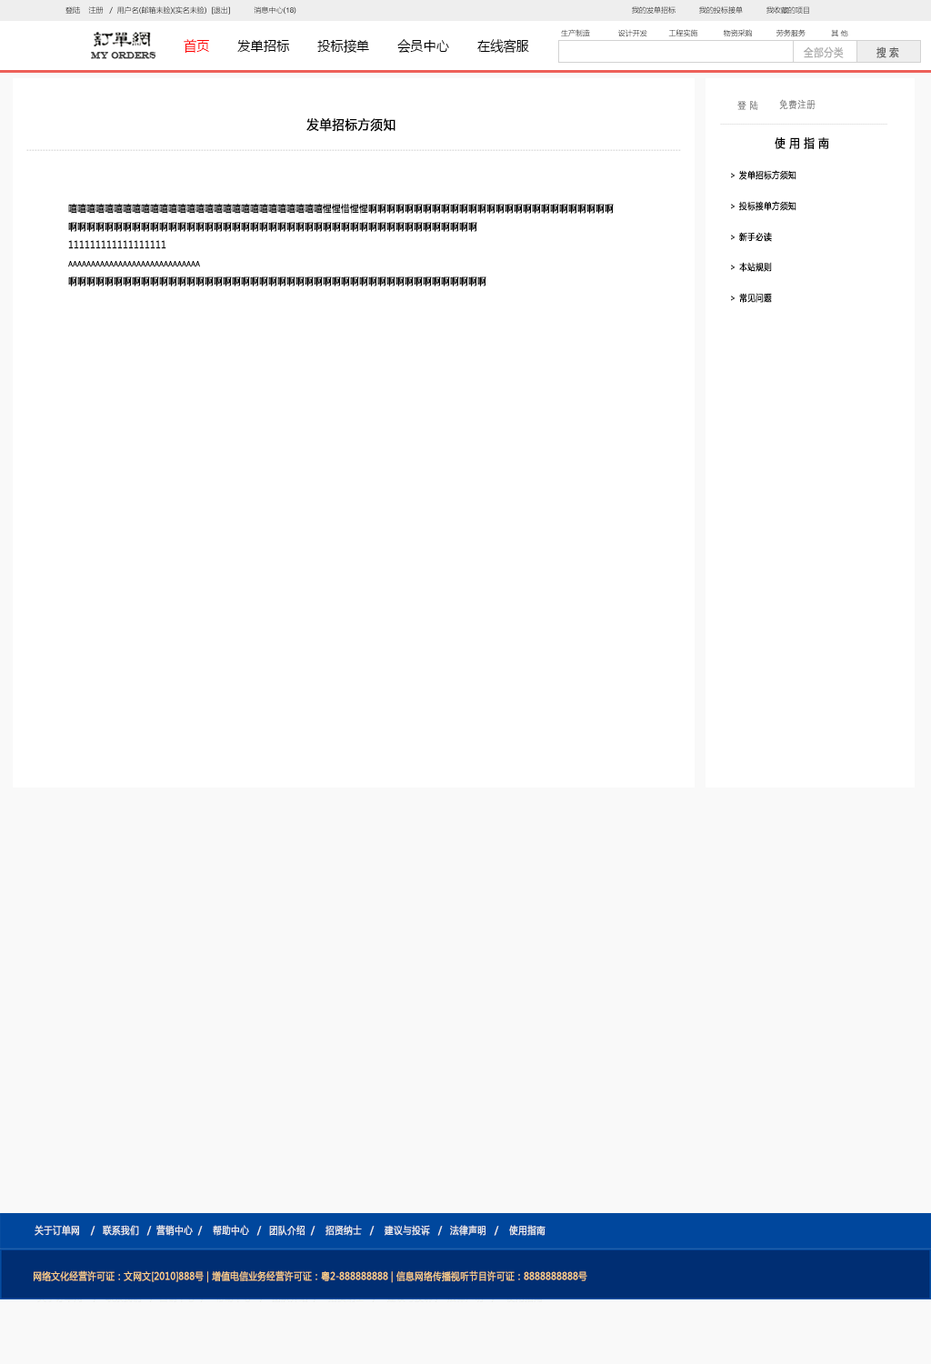
<style>
.page{position:relative;width:931px;height:1364px;background:#ffffff}
.page>*{position:absolute;margin:0}
.t1{font:7.3px "MicrosoftYaHei"}
.t2{font:7.3px "ArialMT"}
.t3{font:14px "MicrosoftYaHei";color:#000000;font-variant:small-caps;scale:0.94 1}
.t4{font:14px "MicrosoftYaHei";color:#ff0000;font-variant:small-caps;scale:0.94 1}
.t5{font:9px "EngraversMT";color:#434343;font-variant:small-caps;font-weight:bold;scale:0.86 1}
.t6{font:11px "MicrosoftYaHei";color:#aaaaaa;font-variant:small-caps;font-weight:bold;scale:0.86 1}
.t7{font:11px "MicrosoftYaHei";color:#626262;font-variant:small-caps;font-weight:bold;scale:0.86 1}
.t8{font:10px "STXihei";color:#767676;font-variant:small-caps;font-weight:bold;scale:0.86 1}
.t9{font:13px "MicrosoftYaHei";color:#000000;font-variant:small-caps;font-weight:bold;scale:0.93 1}
.t10{font:6px "STXihei";color:#dcdcdc;font-variant:small-caps;font-weight:bold;scale:0.86 1}
.t11{font:12px "MicrosoftYaHei";color:#000000;font-variant:small-caps;font-weight:bold;scale:0.86 1}
.t12{font:6px "MicrosoftYaHei";font-variant:small-caps;font-weight:bold;scale:0.86 1}
.t13{font:9px "MicrosoftYaHei";color:#000000;font-variant:small-caps;font-weight:bold;scale:0.86 1}
.t14{font:10px "MicrosoftYaHei";color:#000000;font-variant:small-caps;font-weight:bold;scale:0.86 1}
.t15{font:10px/18.2px "MicrosoftYaHei";color:#000000;font-variant:small-caps;font-weight:bold;scale:0.86 1}
.t16{font:10px "MicrosoftYaHei";color:#eeeeee;font-variant:small-caps;font-weight:bold;scale:0.86 1}
.t17{font:14px "STXihei";color:#eeeeee;font-variant:small-caps;font-weight:bold;scale:0.86 1}
.t18{font:10px "MicrosoftYaHei";color:#facd89;font-variant:small-caps;font-weight:bold;scale:0.87 1}
.t19{font:10px "MicrosoftYaHei";color:#eeeeee;font-variant:small-caps;font-weight:bold;scale:0.87 1}
</style>
<div class="page">
<p class="t1" style="left:65px;top:6px;width:231px;height:9px">登陆    注册   /  用户名(邮箱未验)(实名未验)  [退出]           消息中心(<span class="t2">18</span>)</p>
<p class="t1" style="left:632px;top:6px;width:177px;height:8px">我的发单招标           我的投标接单           我收藏的项目</p>
<p class="t1" style="left:561px;top:29px;width:287px;height:8px">生产制造             设计开发          工程实施            物资采购           劳务服务            其 他</p>
<p class="t3" style="left:184px;top:39px;width:345px;height:15px"><span class="t4">首页       </span>发单招标       投标接单       会员中心       在线客服</p>
<p class="t5" style="left:91px;top:52px;width:65px;height:7px">MY ORDERS</p>
<p class="t6" style="left:804px;top:46px;width:40px;height:12px">全部分类</p>
<p class="t7" style="left:876px;top:46px;width:23px;height:12px">搜 索</p>
<p class="t8" style="left:737px;top:100px;width:21px;height:10px">登 陆</p>
<p class="t8" style="left:779px;top:99px;width:36px;height:10px">免费注册</p>
<p class="t9" style="left:306px;top:118px;width:89px;height:14px">发单招标方须知</p>
<p class="t10" style="left:720px;top:124px;width:167px;height:1px">--------------------------------------------------------------------------------------------</p>
<p class="t11" style="left:775px;top:137px;width:54px;height:12px">使 用 指 南</p>
<p class="t12" style="left:26px;top:149px;width:655px;height:2px">------------------------------------------------------------------------------------------------------------------------------------------------------------------------------------------------------------------------------------------------</p>
<p class="t13" style="left:731px;top:170px;width:65px;height:10px"><span class="t14"> </span>&gt; 发单招标方须知</p>
<p class="t15" style="left:68px;top:204px;width:546px;height:82px">嘻嘻嘻嘻嘻嘻嘻嘻嘻嘻嘻嘻嘻嘻嘻嘻嘻嘻嘻嘻嘻嘻嘻嘻嘻嘻嘻嘻惺惺惜惺惺啊啊啊啊啊啊啊啊啊啊啊啊啊啊啊啊啊啊啊啊啊啊啊啊啊啊啊<br>啊啊啊啊啊啊啊啊啊啊啊啊啊啊啊啊啊啊啊啊啊啊啊啊啊啊啊啊啊啊啊啊啊啊啊啊啊啊啊啊啊啊啊啊啊<br>111111111111111111<br>aaaaaaaaaaaaaaaaaaaaaaaaaaaaa<br>啊啊啊啊啊啊啊啊啊啊啊啊啊啊啊啊啊啊啊啊啊啊啊啊啊啊啊啊啊啊啊啊啊啊啊啊啊啊啊啊啊啊啊啊啊啊</p>
<p class="t13" style="left:731px;top:201px;width:65px;height:10px"><span class="t14"> </span>&gt; 投标接单方须知</p>
<p class="t13" style="left:731px;top:232px;width:41px;height:10px"><span class="t14"> </span>&gt; 新手必读</p>
<p class="t13" style="left:731px;top:262px;width:41px;height:10px"><span class="t14"> </span>&gt; 本站规则</p>
<p class="t13" style="left:731px;top:293px;width:41px;height:10px"><span class="t14"> </span>&gt; 常见问题</p>
<p class="t16" style="left:35px;top:1225px;width:510px;height:10px"><span class="t17"><br><br></span>关于订单网    /   联系我们   /  营销中心  /    帮助中心   /   团队介绍  /    招贤纳士   /    建议与投诉   /   法律声明   /    使用指南</p>
<p class="t18" style="left:34px;top:1270px;width:553px;height:13px"><span class="t19"> </span>网络文化经营许可证：文网文[2010]888号 | 增值电信业务经营许可证：粤2-888888888 | 信息网络传播视听节目许可证：8888888888号</p>
</div>
